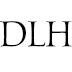
<style>
.page{position:relative;width:72px;height:72px;background:#ffffff}
.page>*{position:absolute;margin:0}
.t1{font:35px "CarrigRough-Regular";color:#000000}
</style>
<div class="page">
<p class="t1" style="left:0px;top:21px;width:72px;height:26px">DLH</p>
</div>
